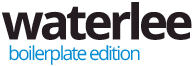
<style>
.page{position:relative;width:195px;height:66px;background:#ffffff}
.page>*{position:absolute;margin:0}
.t1{font:49px "OpenSans-Bold";letter-spacing:-0.075em;color:#241c21}
.t2{font:19.2px "OpenSans";letter-spacing:-0.088em;color:#058cd2}
</style>
<div class="page">
<p class="t1" style="left:1px;top:2px;width:191px;height:38px">waterlee</p>
<p class="t1" style="left:2px;top:2px;width:190px;height:39px">waterlee</p>
<p class="t2" style="left:9px;top:45px;width:131px;height:20px">boilerplate edition</p>
</div>
